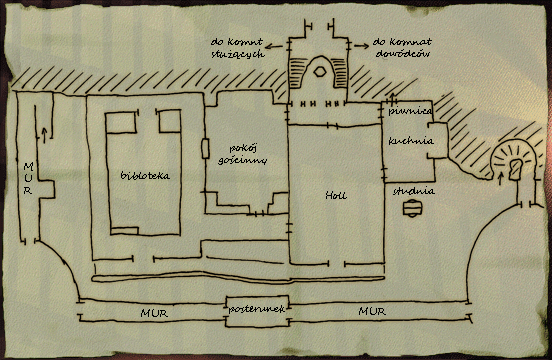
<style>
.page{position:relative;width:552px;height:360px}
.page>*{position:absolute;margin:0}
.t1{font:10px "SegoeScript";color:#000000}
</style>
<div class="page">
<p class="t1" style="left:211px;top:38px;width:54px;height:21px;text-align:center">do komnt<br>służących</p>
<p class="t1" style="left:373px;top:38px;width:59px;height:19px;text-align:center">do komnat <br>dowódców</p>
<p class="t1" style="left:389px;top:106px;width:44px;height:10px">piwnica</p>
<p class="t1" style="left:389px;top:136px;width:45px;height:9px">kuchnia</p>
<p class="t1" style="left:218px;top:143px;width:49px;height:22px;text-align:center">pokój<br>gościnny</p>
<p class="t1" style="left:24px;top:162px;width:9px;height:32px;text-align:center">M<br>U<br>R</p>
<p class="t1" style="left:121px;top:171px;width:49px;height:9px">bibloteka</p>
<p class="t1" style="left:326px;top:191px;width:21px;height:8px">Holl</p>
<p class="t1" style="left:393px;top:186px;width:42px;height:9px">studnia</p>
<p class="t1" style="left:229px;top:305px;width:56px;height:9px">posterunek</p>
<p class="t1" style="left:141px;top:309px;width:27px;height:8px">MUR</p>
<p class="t1" style="left:359px;top:307px;width:27px;height:8px">MUR</p>
</div>
